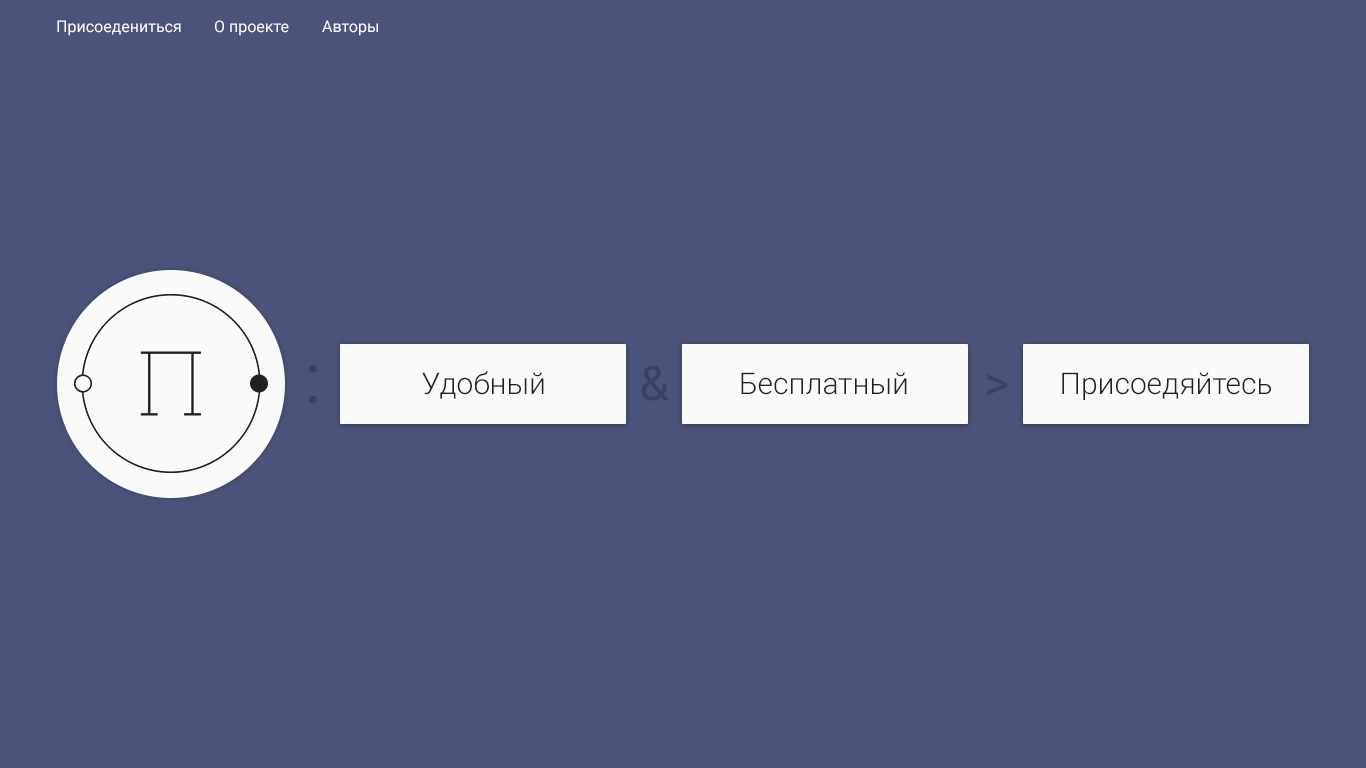
<style>
.page{position:relative;width:1366px;height:768px;background:#4b537b}
.page>*{position:absolute;margin:0}
.t1{font:16px "Roboto-Regular";color:#fafafa}
.t2{font:72px "Roboto-Regular";color:#3b4161}
.t3{font:48px "Roboto-Regular";color:#3b4161}
.t4{font:30px "Roboto-Light";color:#212121}
</style>
<div class="page">
<p class="t1" style="left:57px;top:20px;width:124px;height:16px">Присоедениться</p>
<p class="t1" style="left:215px;top:20px;width:74px;height:16px">О проекте</p>
<p class="t1" style="left:322px;top:20px;width:56px;height:16px">Авторы</p>
<p class="t2" style="left:308px;top:365px;width:9px;height:39px">:</p>
<p class="t3" style="left:641px;top:365px;width:28px;height:36px">&amp;</p>
<p class="t4" style="left:422px;top:371px;width:122px;height:28px">Удобный</p>
<p class="t4" style="left:741px;top:372px;width:166px;height:23px">Бесплатный</p>
<p class="t3" style="left:987px;top:374px;width:21px;height:22px">&gt;</p>
<p class="t4" style="left:1062px;top:372px;width:209px;height:28px">Присоедяйтесь</p>
</div>
